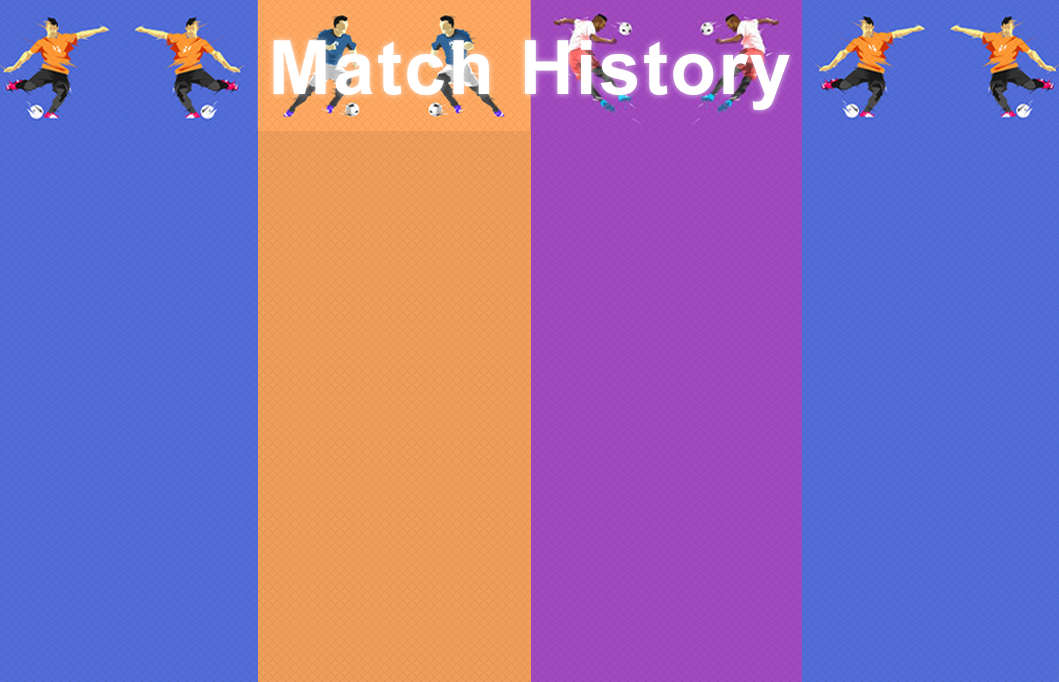
<style>
.page{position:relative;width:1059px;height:682px;background:#526dd8}
.page>*{position:absolute;margin:0}
.t1{font:75px "Arial-BoldMT";letter-spacing:0.03em;color:#ffffff}
</style>
<div class="page">
<p class="t1" style="left:273px;top:40px;width:517px;height:70px">Match History</p>
</div>
